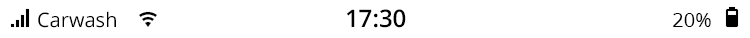
<style>
.page{position:relative;width:750px;height:38px;background:#ffffff}
.page>*{position:absolute;margin:0}
.t1{font:20px "OpenSans";color:#000000}
.t2{font:24px "OpenSans-Semibold";color:#000000}
</style>
<div class="page">
<p class="t1" style="left:38px;top:11px;width:78px;height:17px">Carwash</p>
<p class="t2" style="left:347px;top:9px;width:59px;height:19px">17:30</p>
<p class="t1" style="left:673px;top:13px;width:38px;height:14px">20%</p>
</div>
